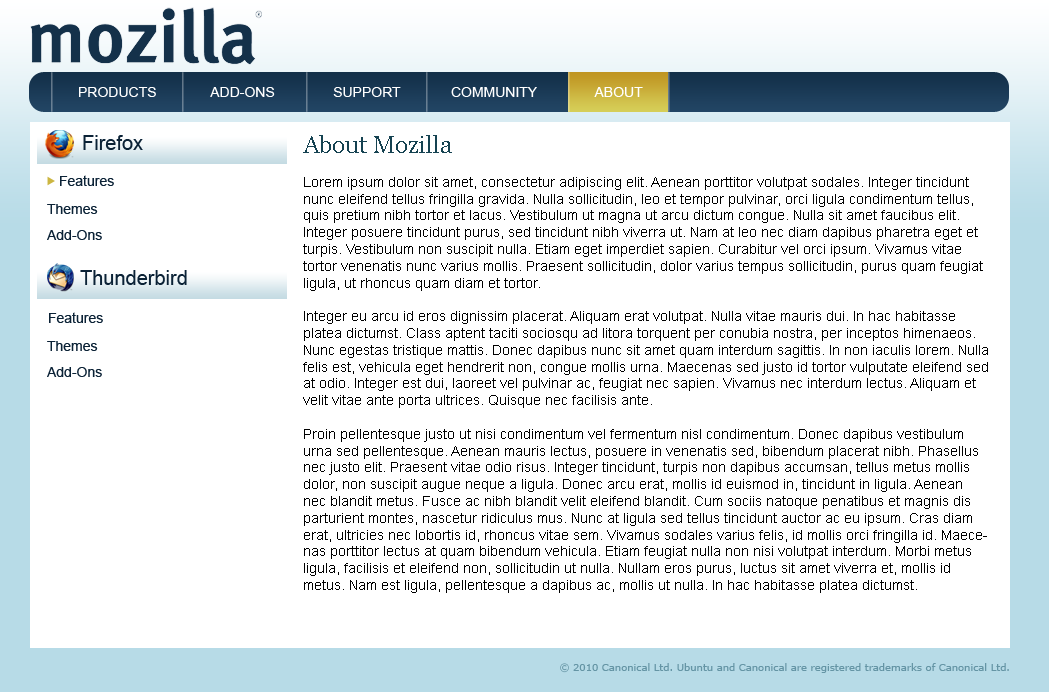
<style>
.page{position:relative;width:1049px;height:692px;background:#ffffff}
.page>*{position:absolute;margin:0}
.t1{font:14px "ArialMT";color:#ffffff}
.t2{font:20px "ArialMT";color:#0b2236}
.t3{font:14px "ArialMT";color:#000000}
.t4{font:24px "Georgia";color:#154251}
.t5{font:14px "ArialMT";color:#0b2236}
.t6{font:10px "Verdana";color:#6595a5}
</style>
<div class="page">
<p class="t1" style="left:79px;top:87px;width:564px;height:10px">PRODUCTS              ADD-ONS               SUPPORT             COMMUNITY               ABOUT</p>
<p class="t2" style="left:83px;top:135px;width:60px;height:15px">Firefox</p>
<p class="t3" style="left:303px;top:135px;width:685px;height:458px"><span class="t4">About Mozilla<br></span><br>Lorem ipsum dolor sit amet, consectetur adipiscing elit. Aenean porttitor volutpat sodales. Integer tincidunt nunc eleifend tellus fringilla gravida. Nulla sollicitudin, leo et tempor pulvinar, orci ligula condimentum tellus, quis pretium nibh tortor et lacus. Vestibulum ut magna ut arcu dictum congue. Nulla sit amet faucibus elit. Integer posuere tincidunt purus, sed tincidunt nibh viverra ut. Nam at leo nec diam dapibus pharetra eget et turpis. Vestibulum non suscipit nulla. Etiam eget imperdiet sapien. Curabitur vel orci ipsum. Vivamus vitae tortor venenatis nunc varius mollis. Praesent sollicitudin, dolor varius tempus sollicitudin, purus quam feugiat ligula, ut rhoncus quam diam et tortor.<br><br>Integer eu arcu id eros dignissim placerat. Aliquam erat volutpat. Nulla vitae mauris dui. In hac habitasse platea dictumst. Class aptent taciti sociosqu ad litora torquent per conubia nostra, per inceptos himenaeos. Nunc egestas tristique mattis. Donec dapibus nunc sit amet quam interdum sagittis. In non iaculis lorem. Nulla felis est, vehicula eget hendrerit non, congue mollis urna. Maecenas sed justo id tortor vulputate eleifend sed at odio. Integer est dui, laoreet vel pulvinar ac, feugiat nec sapien. Vivamus nec interdum lectus. Aliquam et velit vitae ante porta ultrices. Quisque nec facilisis ante.<br><br>Proin pellentesque justo ut nisi condimentum vel fermentum nisl condimentum. Donec dapibus vestibulum urna sed pellentesque. Aenean mauris lectus, posuere in venenatis sed, bibendum placerat nibh. Phasellus nec justo elit. Praesent vitae odio risus. Integer tincidunt, turpis non dapibus accumsan, tellus metus mollis dolor, non suscipit augue neque a ligula. Donec arcu erat, mollis id euismod in, tincidunt in ligula. Aenean nec blandit metus. Fusce ac nibh blandit velit eleifend blandit. Cum sociis natoque penatibus et magnis dis parturient montes, nascetur ridiculus mus. Nunc at ligula sed tellus tincidunt auctor ac eu ipsum. Cras diam erat, ultricies nec lobortis id, rhoncus vitae sem. Vivamus sodales varius felis, id mollis orci fringilla id. Maecenas porttitor lectus at quam bibendum vehicula. Etiam feugiat nulla non nisi volutpat interdum. Morbi metus ligula, facilisis et eleifend non, sollicitudin ut nulla. Nullam eros purus, luctus sit amet viverra et, mollis id metus. Nam est ligula, pellentesque a dapibus ac, mollis ut nulla. In hac habitasse platea dictumst.</p>
<p class="t5" style="left:60px;top:175px;width:54px;height:11px">Features</p>
<p class="t5" style="left:47px;top:204px;width:51px;height:10px">Themes</p>
<p class="t5" style="left:47px;top:230px;width:55px;height:10px">Add-Ons</p>
<p class="t2" style="left:80px;top:270px;width:107px;height:15px">Thunderbird</p>
<p class="t5" style="left:49px;top:312px;width:54px;height:11px">Features</p>
<p class="t5" style="left:47px;top:341px;width:51px;height:10px">Themes</p>
<p class="t5" style="left:47px;top:367px;width:55px;height:10px">Add-Ons</p>
<p class="t6" style="left:560px;top:663px;width:449px;height:10px">© 2010 Canonical Ltd. Ubuntu and Canonical are registered trademarks of Canonical Ltd.</p>
</div>
